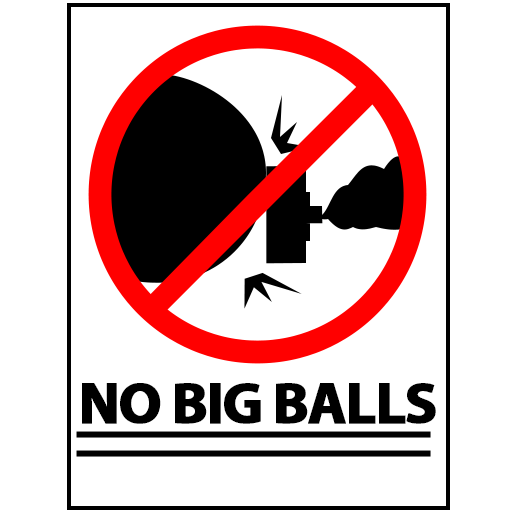
<style>
.page{position:relative;width:512px;height:512px;background:#ffffff}
.page>*{position:absolute;margin:0}
.t1{font:59px "MyriadPro-Bold";letter-spacing:-0.04em;color:#000000;font-variant:small-caps;font-weight:bold}
</style>
<div class="page">
<p class="t1" style="left:82px;top:383px;width:354px;height:41px">NO BIG BALLS</p>
</div>
